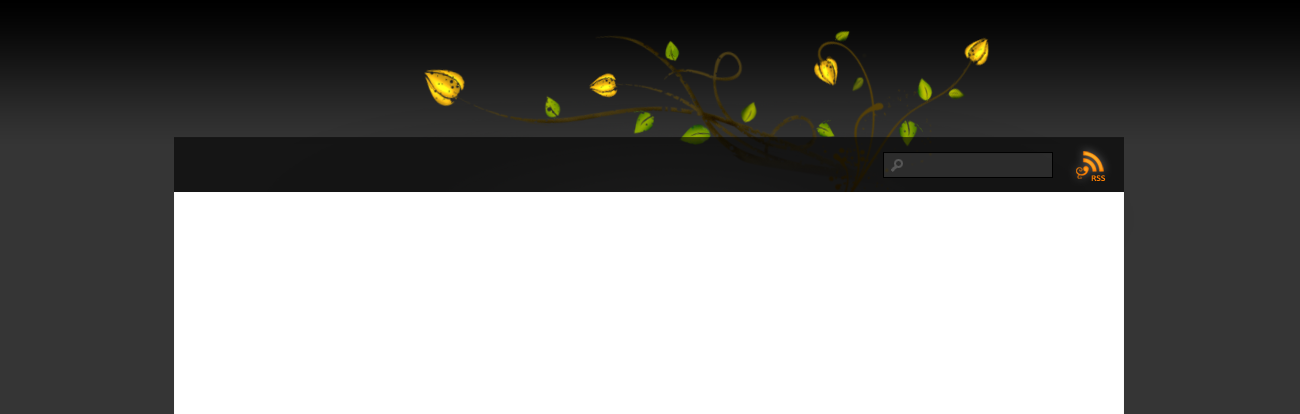
<style>
.page{position:relative;width:1300px;height:414px;background:#ffffff}
.page>*{position:absolute;margin:0}
.t1{font:8.3px "Calibri";color:#fd7e01;scale:1.2 1}
</style>
<div class="page">
<p class="t1" style="left:1091px;top:175px;width:15px;height:6px">RSS</p>
</div>
